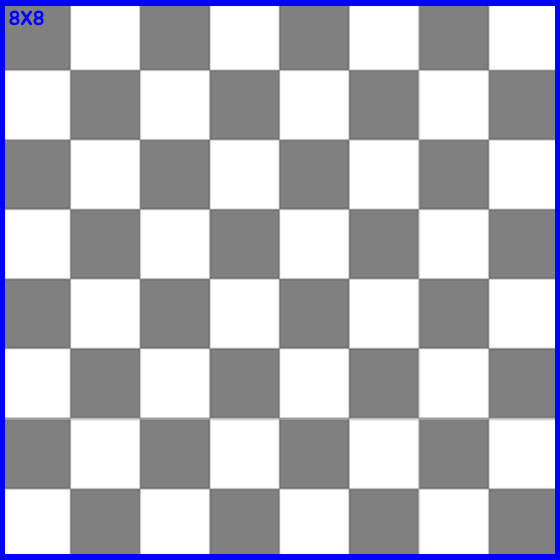
<style>
.page{position:relative;width:560px;height:560px;background:#ffffff}
.page>*{position:absolute;margin:0}
.t1{font:20px "BMJUA";color:#0000ff}
</style>
<div class="page">
<p class="t1" style="left:9px;top:10px;width:35px;height:16px">8X8</p>
</div>
